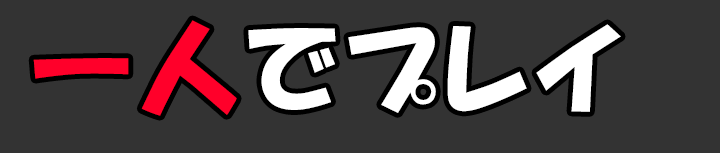
<style>
.page{position:relative;width:720px;height:153px;background:#333333}
.page>*{position:absolute;margin:0}
.t1{font:100px "HGPSoeiKakupoptai";letter-spacing:0.075em;color:#ffffff}
.t2{font:100px "HGPSoeiKakupoptai";letter-spacing:0.075em;color:#ff002a}
</style>
<div class="page">
<p class="t1" style="left:33px;top:20px;width:588px;height:96px"><span class="t2">一人</span>でプレイ</p>
</div>
